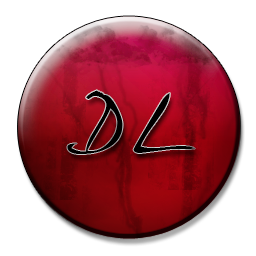
<style>
.page{position:relative;width:256px;height:256px;background:#ffffff}
.page>*{position:absolute;margin:0}
.t1{font:100px "GiffordsHand";color:#000000}
</style>
<div class="page">
<p class="t1" style="left:67px;top:90px;width:128px;height:64px">DL</p>
</div>
